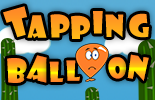
<style>
.page{position:relative;width:155px;height:100px}
.page>*{position:absolute;margin:0}
.t1{font:37px "ShowcardGothic-Reg";color:#ff9622}
.t2{font:29.9px "ShowcardGothic-Reg";color:#ffa71d}
.t3{font:29.9px "ShowcardGothic-Reg";color:#ff9f20}
.t4{font:29.9px "ShowcardGothic-Reg";color:#ffa31e}
.t5{font:29.9px "ShowcardGothic-Reg";color:#ff9b21}
.t6{font:29.9px "ShowcardGothic-Reg";color:#ffa11f}
.t7{font:29.9px "ShowcardGothic-Reg";color:#ffa21e}
.t8{font:31.3px "ShowcardGothic-Reg"}
.t9{font:31.2px "ShowcardGothic-Reg"}
.t10{font:32.4px "ShowcardGothic-Reg"}
.t11{font:27px "ShowcardGothic-Reg"}
</style>
<div class="page">
<p class="t1" style="left:3px;top:6px;width:24px;height:32px;rotate:-16deg">T</p>
<p class="t2" style="left:27px;top:15px;width:20px;height:24px">a</p>
<p class="t3" style="left:50px;top:14px;width:20px;height:24px">p</p>
<p class="t4" style="left:71px;top:15px;width:19px;height:24px">p</p>
<p class="t5" style="left:93px;top:11px;width:10px;height:23px">i</p>
<p class="t6" style="left:105px;top:14px;width:19px;height:24px">n</p>
<p class="t7" style="left:129px;top:13px;width:20px;height:25px">g</p>
<p class="t8" style="left:127px;top:54px;width:22px;height:27px;rotate:11deg">n</p>
<p class="t9" style="left:7px;top:58px;width:20px;height:25px">b</p>
<p class="t10" style="left:26px;top:55px;width:21px;height:28px;rotate:13deg">a</p>
<p class="t11" style="left:49px;top:61px;width:15px;height:21px">l</p>
<p class="t11" style="left:66px;top:60px;width:14px;height:21px">l</p>
<p class="t11" style="left:108px;top:57px;width:19px;height:22px;rotate:-6deg">o</p>
</div>
